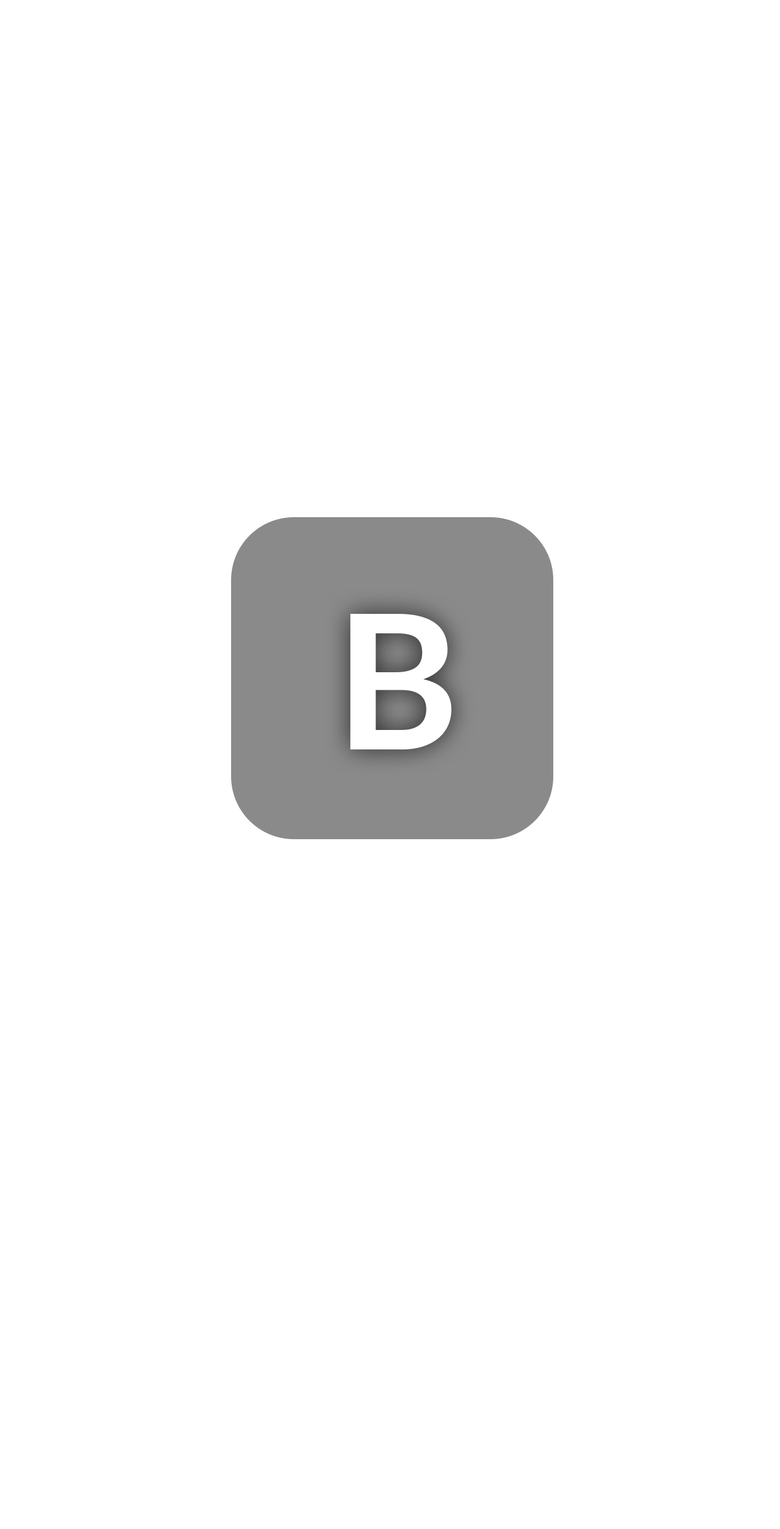
<style>
.page{position:relative;width:780px;height:1529px;background:#ffffff}
.page>*{position:absolute;margin:0}
.t1{font:188.4px "Lato-Bold";color:#ffffff}
</style>
<div class="page">
<p class="t1" style="left:350px;top:614px;width:101px;height:136px">B</p>
</div>
